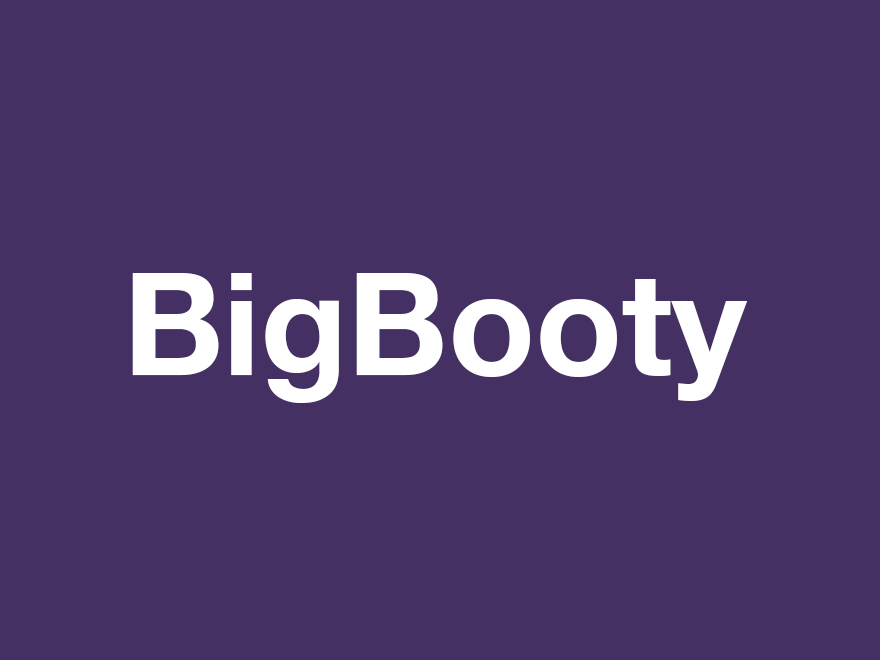
<style>
.page{position:relative;width:880px;height:660px;background:#443063}
.page>*{position:absolute;margin:0}
.t1{font:142.6px "HelveticaNeue-Bold";color:#ffffff}
</style>
<div class="page">
<p class="t1" style="left:132px;top:273px;width:616px;height:130px">BigBooty</p>
</div>
